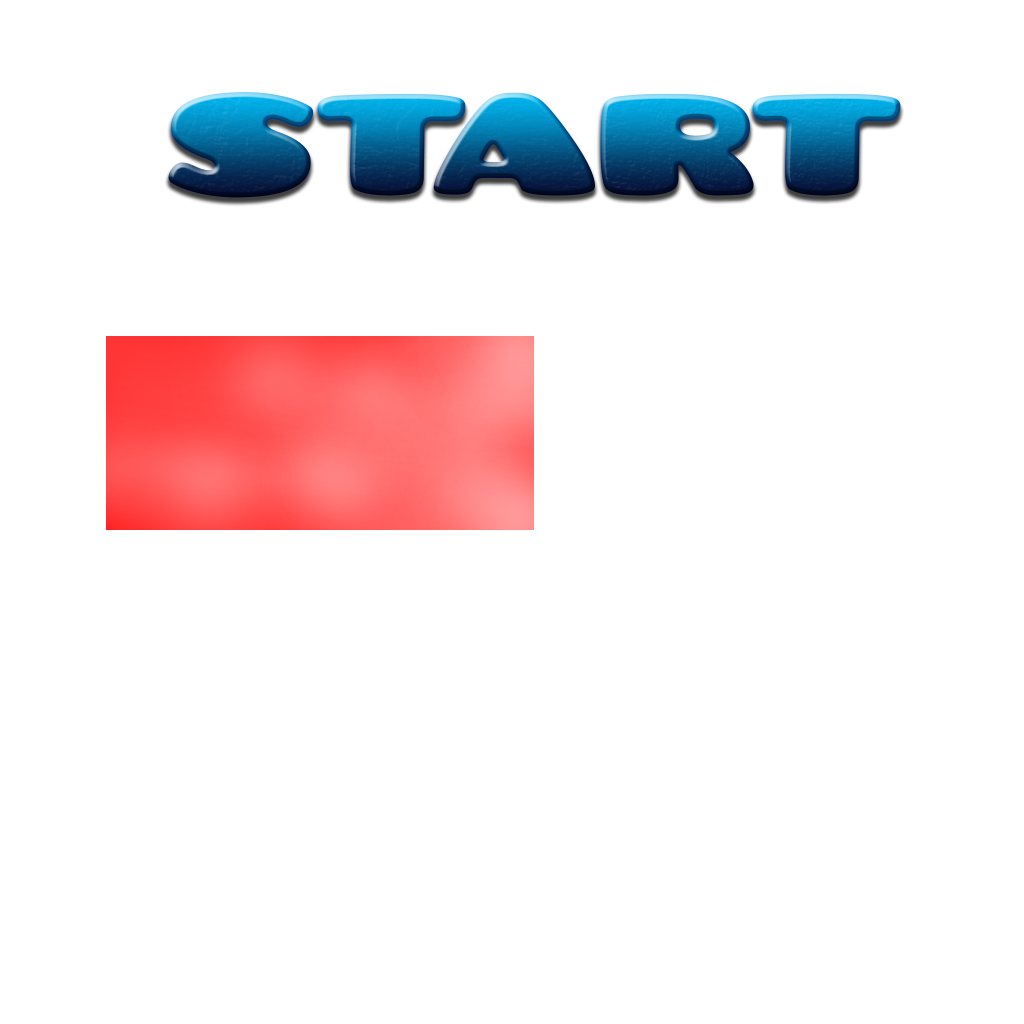
<style>
.page{position:relative;width:1024px;height:1024px;background:#ffffff}
.page>*{position:absolute;margin:0}
.t1{font:156.3px "Pusab";letter-spacing:-0.02em;scale:1.48 1}
</style>
<div class="page">
<p class="t1" style="left:168px;top:92px;width:733px;height:106px">START</p>
</div>
